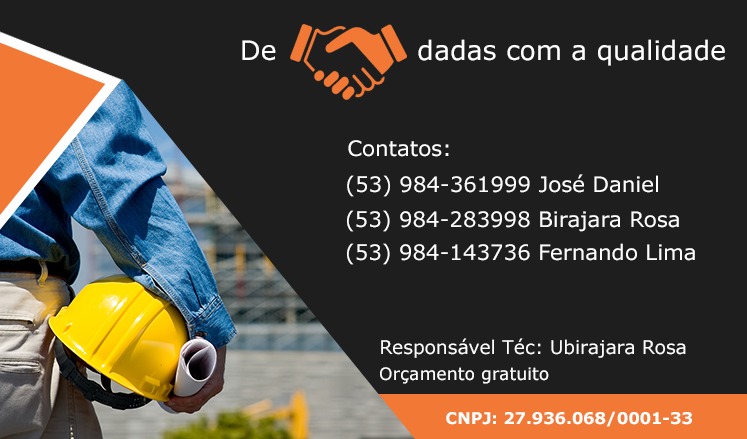
<style>
.page{position:relative;width:747px;height:439px;background:#1e1e1e}
.page>*{position:absolute;margin:0}
.t1{font:26.7px "Verdana";color:#ffffff}
.t2{font:21.3px "Verdana";color:#ffffff}
.t3{font:18.7px "Verdana";color:#ffffff}
.t4{font:17.3px "Verdana";color:#ffffff}
.t5{font:16px "Verdana-Bold";color:#ffffff}
</style>
<div class="page">
<p class="t1" style="left:242px;top:39px;width:483px;height:27px">De               dadas com a qualidade</p>
<p class="t2" style="left:348px;top:140px;width:101px;height:17px">Contatos:</p>
<p class="t2" style="left:347px;top:174px;width:311px;height:23px">(53) 984-361999 José Daniel</p>
<p class="t2" style="left:347px;top:210px;width:332px;height:22px">(53) 984-283998 Birajara Rosa</p>
<p class="t2" style="left:347px;top:243px;width:348px;height:22px">(53) 984-143736 Fernando Lima</p>
<p class="t3" style="left:381px;top:338px;width:305px;height:20px">Responsável Téc: Ubirajara Rosa</p>
<p class="t4" style="left:380px;top:367px;width:169px;height:17px">Orçamento gratuito</p>
<p class="t5" style="left:446px;top:411px;width:246px;height:16px">CNPJ: 27.936.068/0001-33</p>
</div>
